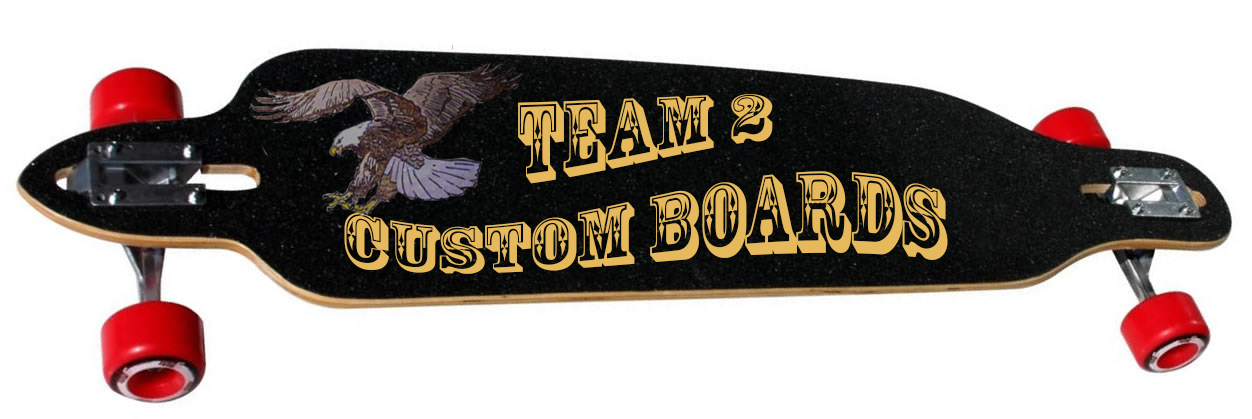
<style>
.page{position:relative;width:1252px;height:419px;background:#ffffff}
.page>*{position:absolute;margin:0}
.t1{font:84px "RosewoodStd-Regular";color:#e6ba5c}
</style>
<div class="page">
<p class="t1" style="left:344px;top:94px;width:604px;height:180px;text-align:center">TEAM 2<br>CUSTOM BOARDS</p>
</div>
